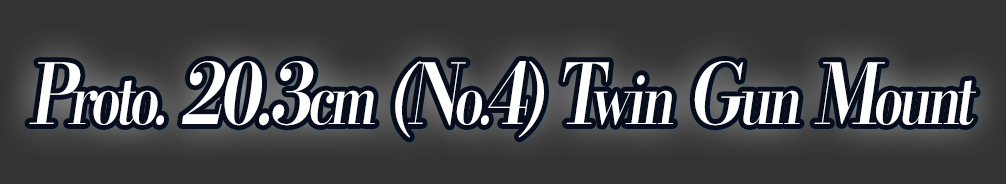
<style>
.page{position:relative;width:1006px;height:184px;background:#333333}
.page>*{position:absolute;margin:0}
.t1{font:67.2px "KochoStd-Heavy";letter-spacing:-0.08em;color:#ffffff;font-style:italic;scale:0.81 1}
.t2{font:84px "KochoStd-Heavy";letter-spacing:-0.08em;color:#ffffff;font-style:italic;scale:0.81 1}
</style>
<div class="page">
<p class="t1" style="left:29px;top:61px;width:947px;height:77px"><span class="t2">P</span>roto.<span class="t2"> 20.3</span>cm<span class="t2"> (N</span>o.<span class="t2">4) T</span>win<span class="t2"> G</span>un<span class="t2"> M</span>ount</p>
</div>
